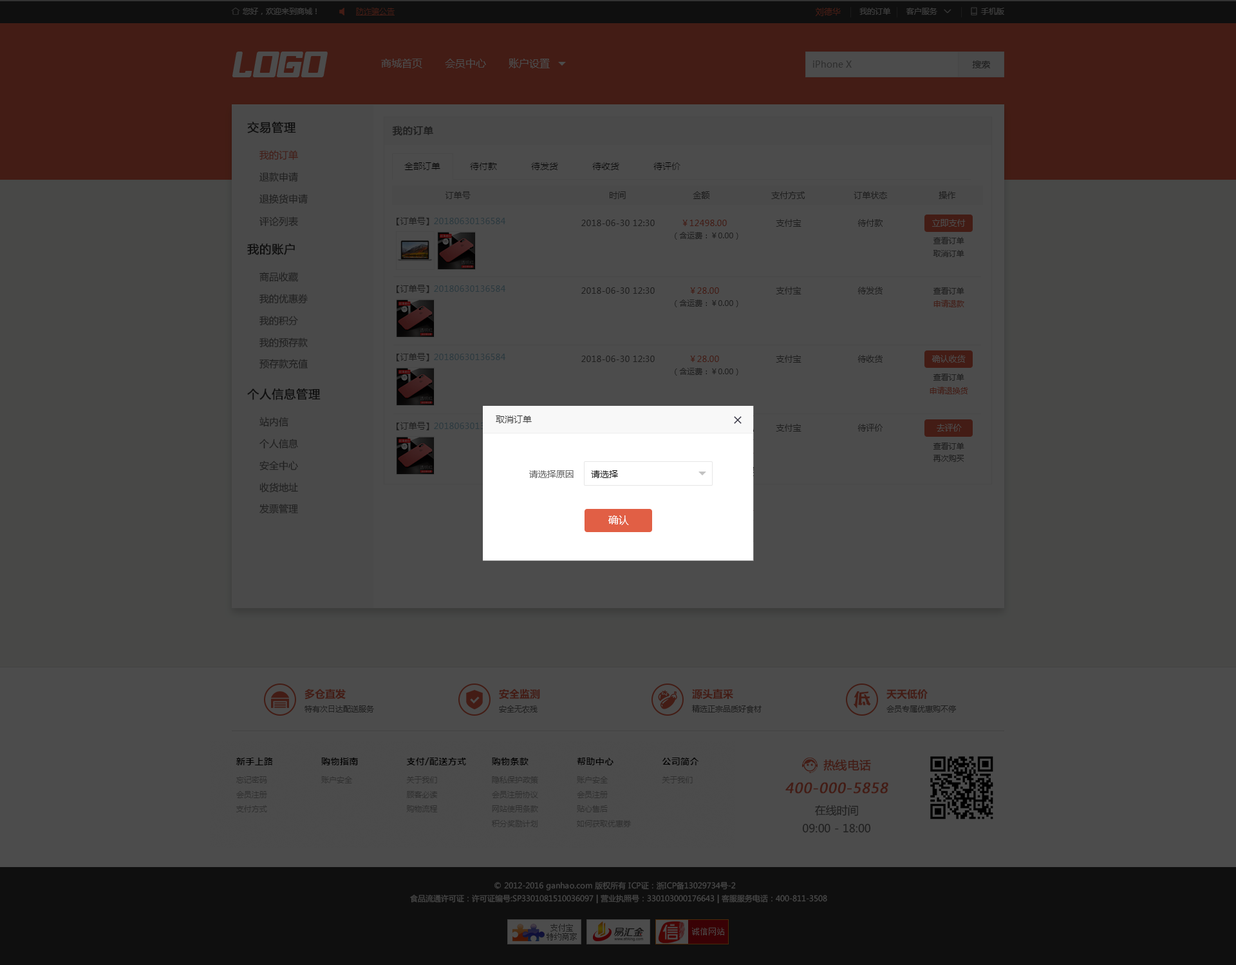
<style>
.page{position:relative;width:1236px;height:965px;background:#4c4c4c}
.page>*{position:absolute;margin:0}
.t1{font:8.4px "MicrosoftYaHei";color:#431c15}
.t2{font:10.3px "MicrosoftYaHei";color:#4c4c4c}
.t3{font:9px "MicrosoftYaHei";color:#2e2e2e}
.t4{font:9px "MicrosoftYaHei";color:#1e1e1e}
.t5{font:11.6px "MicrosoftYaHei";color:#0f0f0f;font-weight:bold}
.t6{font:9.7px "MicrosoftYaHei";color:#1e1e1e;font-weight:bold}
.t7{font:9.7px "MicrosoftYaHei";color:#431c15}
.t8{font:9.7px "MicrosoftYaHei";color:#1e1e1e}
.t9{font:8.4px "MicrosoftYaHei";color:#1e1e1e}
.t10{font:8.4px "MicrosoftYaHei"}
.t11{font:8.4px "MicrosoftYaHei";color:#4c4c4c}
.t12{font:7.7px "MicrosoftYaHei";color:#1e1e1e}
.t13{font:7.7px "MicrosoftYaHei";color:#431c15}
.t14{font:9px "MicrosoftYaHei";color:#666666}
.t15{font:10.3px "MicrosoftYaHei";color:#fffefe}
.t16{font:10.3px "MicrosoftYaHei-Bold";color:#431c15}
.t17{font:11.6px "MicrosoftYaHei";color:#431c15;font-weight:bold}
.t18{font:13.9px "MicrosoftYaHei";color:#431c15;font-weight:bold;font-style:italic}
.t19{font:10.9px/17.9px "MicrosoftYaHei";color:#1e1e1e}
.t20{font:7.7px/12.9px "MicrosoftYaHei";color:#474747}
</style>
<div class="page">
<p class="t1" style="left:816px;top:8px;width:25px;height:8px">刘德华</p>
<p class="t2" style="left:381px;top:58px;width:169px;height:10px">商城首页       会员中心       账户设置</p>
<p class="t3" style="left:813px;top:61px;width:39px;height:7px">iPhone X</p>
<p class="t4" style="left:972px;top:61px;width:18px;height:7px">搜索</p>
<p class="t5" style="left:247px;top:122px;width:49px;height:11px">交易管理</p>
<p class="t6" style="left:392px;top:126px;width:41px;height:10px">我的订单</p>
<p class="t7" style="left:259px;top:150px;width:39px;height:10px">我的订单</p>
<p class="t8" style="left:259px;top:172px;width:39px;height:10px">退款申请</p>
<p class="t8" style="left:259px;top:194px;width:49px;height:10px">退换货申请</p>
<p class="t9" style="left:445px;top:191px;width:511px;height:8px">订单号                                                      时间                          金额                        支付方式                   订单状态                    操作</p>
<p class="t8" style="left:259px;top:216px;width:39px;height:10px">评论列表</p>
<p class="t10" style="left:397px;top:217px;width:108px;height:8px">【订单号】20180630136584</p>
<p class="t9" style="left:581px;top:219px;width:302px;height:8px">2018-06-30 12:30          ￥12498.00                   支付宝                      待付款</p>
<p class="t11" style="left:932px;top:219px;width:34px;height:8px">立即支付</p>
<p class="t12" style="left:675px;top:232px;width:64px;height:8px">（含运费：￥0.00）</p>
<p class="t5" style="left:247px;top:243px;width:48px;height:12px">我的账户</p>
<p class="t12" style="left:934px;top:237px;width:31px;height:7px">查看订单</p>
<p class="t12" style="left:933px;top:250px;width:32px;height:7px">取消订单</p>
<p class="t8" style="left:259px;top:272px;width:39px;height:10px">商品收藏</p>
<p class="t8" style="left:259px;top:294px;width:49px;height:9px">我的优惠券</p>
<p class="t10" style="left:397px;top:285px;width:108px;height:8px">【订单号】20180630136584</p>
<p class="t9" style="left:581px;top:287px;width:302px;height:7px">2018-06-30 12:30             ￥28.00                      支付宝                      待发货</p>
<p class="t12" style="left:934px;top:287px;width:31px;height:7px">查看订单</p>
<p class="t12" style="left:675px;top:299px;width:64px;height:8px">（含运费：￥0.00）</p>
<p class="t13" style="left:934px;top:299px;width:31px;height:8px">申请退款</p>
<p class="t8" style="left:259px;top:316px;width:39px;height:9px">我的积分</p>
<p class="t8" style="left:259px;top:337px;width:49px;height:10px">我的预存款</p>
<p class="t10" style="left:397px;top:353px;width:108px;height:8px">【订单号】20180630136584</p>
<p class="t8" style="left:259px;top:359px;width:49px;height:10px">预存款充值</p>
<p class="t9" style="left:581px;top:355px;width:302px;height:8px">2018-06-30 12:30             ￥28.00                      支付宝                      待收货</p>
<p class="t11" style="left:932px;top:355px;width:34px;height:8px">确认收货</p>
<p class="t12" style="left:675px;top:368px;width:64px;height:7px">（含运费：￥0.00）</p>
<p class="t12" style="left:934px;top:373px;width:31px;height:8px">查看订单</p>
<p class="t5" style="left:247px;top:388px;width:74px;height:12px">个人信息管理</p>
<p class="t13" style="left:930px;top:386px;width:38px;height:8px">申请退换货</p>
<p class="t8" style="left:259px;top:417px;width:29px;height:10px">站内信</p>
<p class="t11" style="left:937px;top:424px;width:25px;height:7px">去评价</p>
<p class="t8" style="left:259px;top:438px;width:39px;height:11px">个人信息</p>
<p class="t12" style="left:934px;top:442px;width:31px;height:7px">查看订单</p>
<p class="t8" style="left:259px;top:460px;width:39px;height:11px">安全中心</p>
<p class="t12" style="left:933px;top:455px;width:32px;height:7px">再次购买</p>
<p class="t14" style="left:529px;top:470px;width:45px;height:8px">请选择原因</p>
<p class="t8" style="left:259px;top:482px;width:39px;height:11px">收货地址</p>
<p class="t8" style="left:259px;top:504px;width:39px;height:9px">发票管理</p>
<p class="t15" style="left:608px;top:515px;width:21px;height:10px">确认</p>
<p class="t16" style="left:305px;top:688px;width:41px;height:11px">多仓直发</p>
<p class="t16" style="left:499px;top:688px;width:41px;height:11px">安全监测</p>
<p class="t16" style="left:692px;top:688px;width:41px;height:11px">源头直采</p>
<p class="t16" style="left:887px;top:688px;width:41px;height:11px">天天低价</p>
<p class="t12" style="left:305px;top:705px;width:69px;height:7px">特有次日达配送服务</p>
<p class="t12" style="left:499px;top:705px;width:39px;height:8px">安全无农残</p>
<p class="t12" style="left:692px;top:704px;width:70px;height:9px">精选正宗品质好食材</p>
<p class="t12" style="left:887px;top:705px;width:69px;height:7px">会员专属优惠购不停</p>
<p class="t17" style="left:824px;top:759px;width:47px;height:12px">热线电话</p>
<p class="t18" style="left:786px;top:782px;width:103px;height:11px">400-000-5858</p>
<p class="t19" style="left:802px;top:804px;width:69px;height:29px;text-align:center">在线时间<br>09:00 - 18:00</p>
<p class="t20" style="left:410px;top:881px;width:417px;height:22px;text-align:center">© 2012-2016 ganhao.com 版权所有 ICP证：浙ICP备13029734号-2   <br>食品流通许可证：许可证编号:SP3301081510036097 | 营业执照号：330103000176643 | 客服服务电话：400-811-3508</p>
</div>
